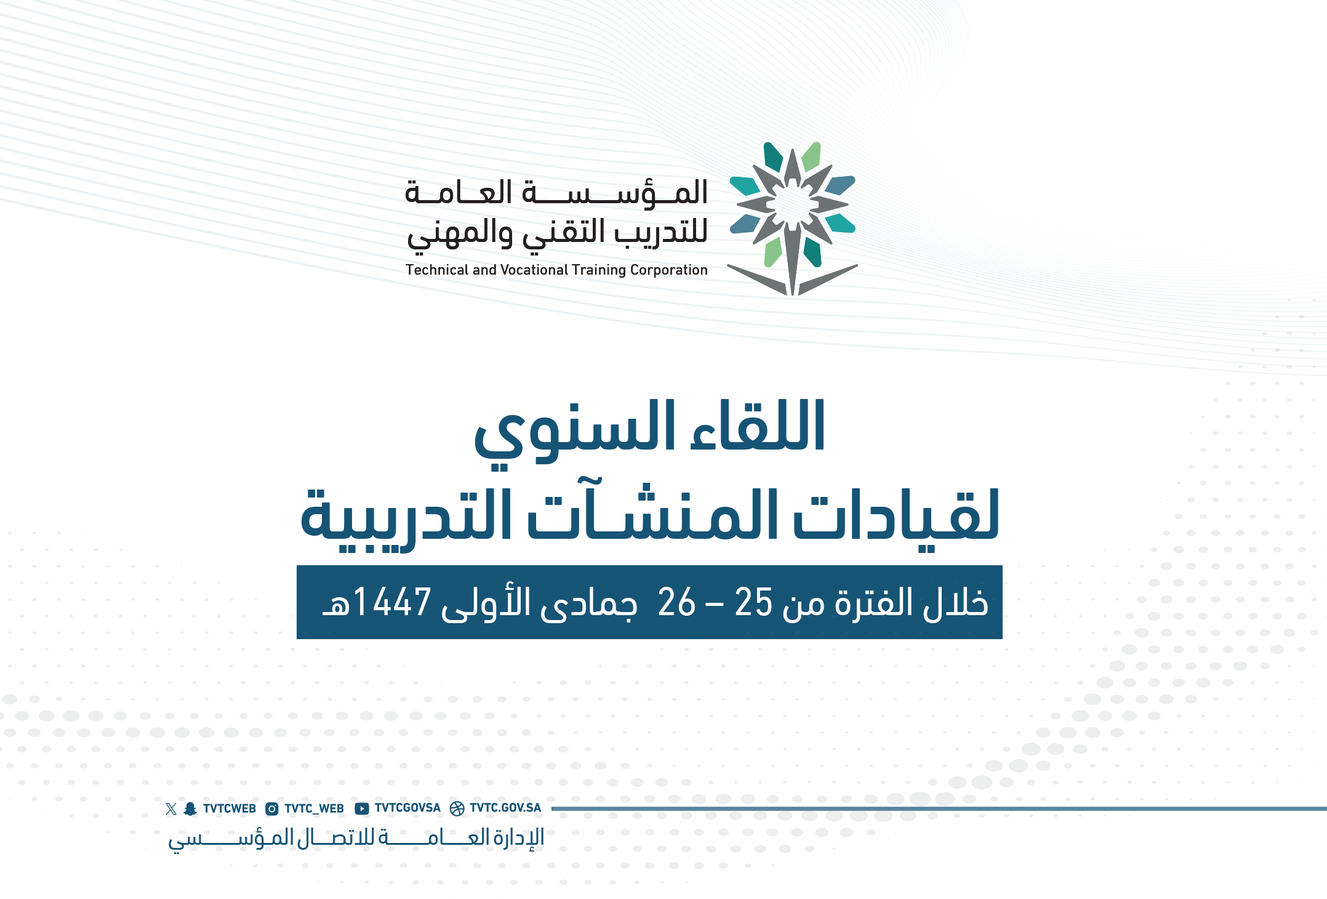
<style>
.page{position:relative;width:1327px;height:899px;background:#ffffff}
.page>*{position:absolute;margin:0}
.t1{font:74.4px "DINNextLTArabic-Medium";letter-spacing:-0.01em;color:#165476;scale:0.93 1}
.t2{font:41.2px "DINNextLTArabic-Regular";letter-spacing:-0.01em;color:#ffffff;scale:0.93 1}
</style>
<div class="page">
<p class="t1" style="left:301px;top:399px;width:697px;height:154px;text-align:center">اللقاء السنوي<br>لقـيادات المـنشــآت التدريبية</p>
<p class="t2" style="left:323px;top:581px;width:665px;height:42px">خلال الفترة من 25 – 26  جمادى الأولى 1447هـ</p>
</div>
